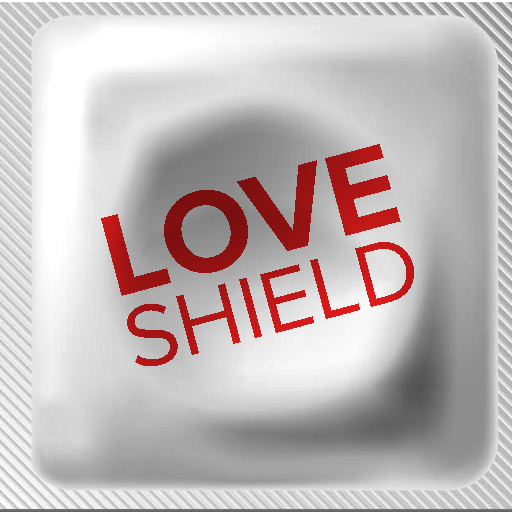
<style>
.page{position:relative;width:512px;height:512px}
.page>*{position:absolute;margin:0}
.t1{font:91px/75.9px "ProximaNova-Regular"}
.t2{font:120.3px/127.2px "ProximaNova-Bold"}
</style>
<div class="page">
<p class="t1" style="left:101px;top:144px;width:313px;height:222px;text-align:center;rotate:-15deg"><span class="t2">LOVE<br></span>SHIELD</p>
</div>
